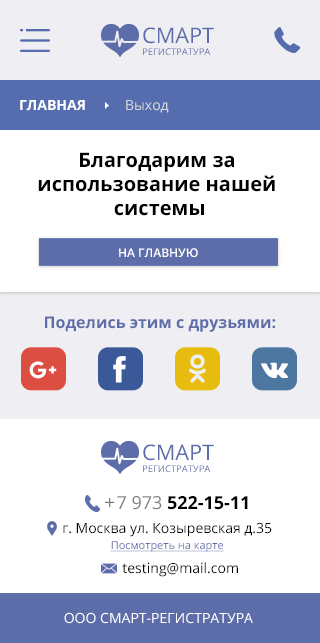
<style>
.page{position:relative;width:320px;height:643px;background:#ffffff}
.page>*{position:absolute;margin:0}
.t1{font:9.3px/11.5px "OpenSans";color:#5d6daa}
.t2{font:21.5px/11.5px "OpenSans";color:#5d6daa}
.t3{font:14px "OpenSans-Bold";color:#ffffff}
.t4{font:14px "OpenSans";color:#d8d8d8}
.t5{font:20px "OpenSans-Bold";color:#000000}
.t6{font:12px "OpenSans-Semibold";color:#ffffff;text-transform:uppercase}
.t7{font:16.1px "OpenSans-Bold";color:#5d6daa}
.t8{font:18px "OpenSans-Bold";color:#000000}
.t9{font:18px "OpenSans";color:#000000}
.t10{font:18px "OpenSans";color:#7b7b81}
.t11{font:18px "HelveticaNeue";color:#7b7b81}
.t12{font:14px/14px "OpenSans";color:#000000}
.t13{font:11px/16px "OpenSans";color:#5d6daa;text-decoration:underline}
.t14{font:14px "OpenSans";color:#000000}
.t15{font:14px "OpenSans";color:#ffffff}
</style>
<div class="page">
<p class="t1" style="left:143px;top:27px;width:71px;height:28px"><span class="t2">CМАРТ<br></span>РЕГИСТРАТУРА</p>
<p class="t3" style="left:20px;top:100px;width:149px;height:13px">ГЛАВНАЯ          <span class="t4">Выход</span></p>
<p class="t5" style="left:38px;top:152px;width:237px;height:64px;text-align:center">Благодарим за <br>использование нашей <br>системы</p>
<p class="t6" style="left:119px;top:248px;width:79px;height:10px">НА ГЛАВНУЮ</p>
<p class="t7" style="left:45px;top:316px;width:231px;height:16px">Поделись этим с друзьями:</p>
<p class="t1" style="left:143px;top:444px;width:71px;height:28px"><span class="t2">CМАРТ<br></span>РЕГИСТРАТУРА</p>
<p class="t8" style="left:117px;top:496px;width:131px;height:14px"><span class="t9">  </span><span class="t10">7 973 </span>522-15-11</p>
<p class="t11" style="left:105px;top:498px;width:10px;height:9px">+</p>
<p class="t12" style="left:63px;top:522px;width:209px;height:30px;text-align:center">г. Москва ул. Козыревская д.35<br><span class="t13">Посмотреть на карте</span></p>
<p class="t14" style="left:122px;top:562px;width:116px;height:15px">testing@mail.com</p>
<p class="t15" style="left:64px;top:612px;width:189px;height:12px">ООО СМАРТ-РЕГИСТРАТУРА</p>
</div>
